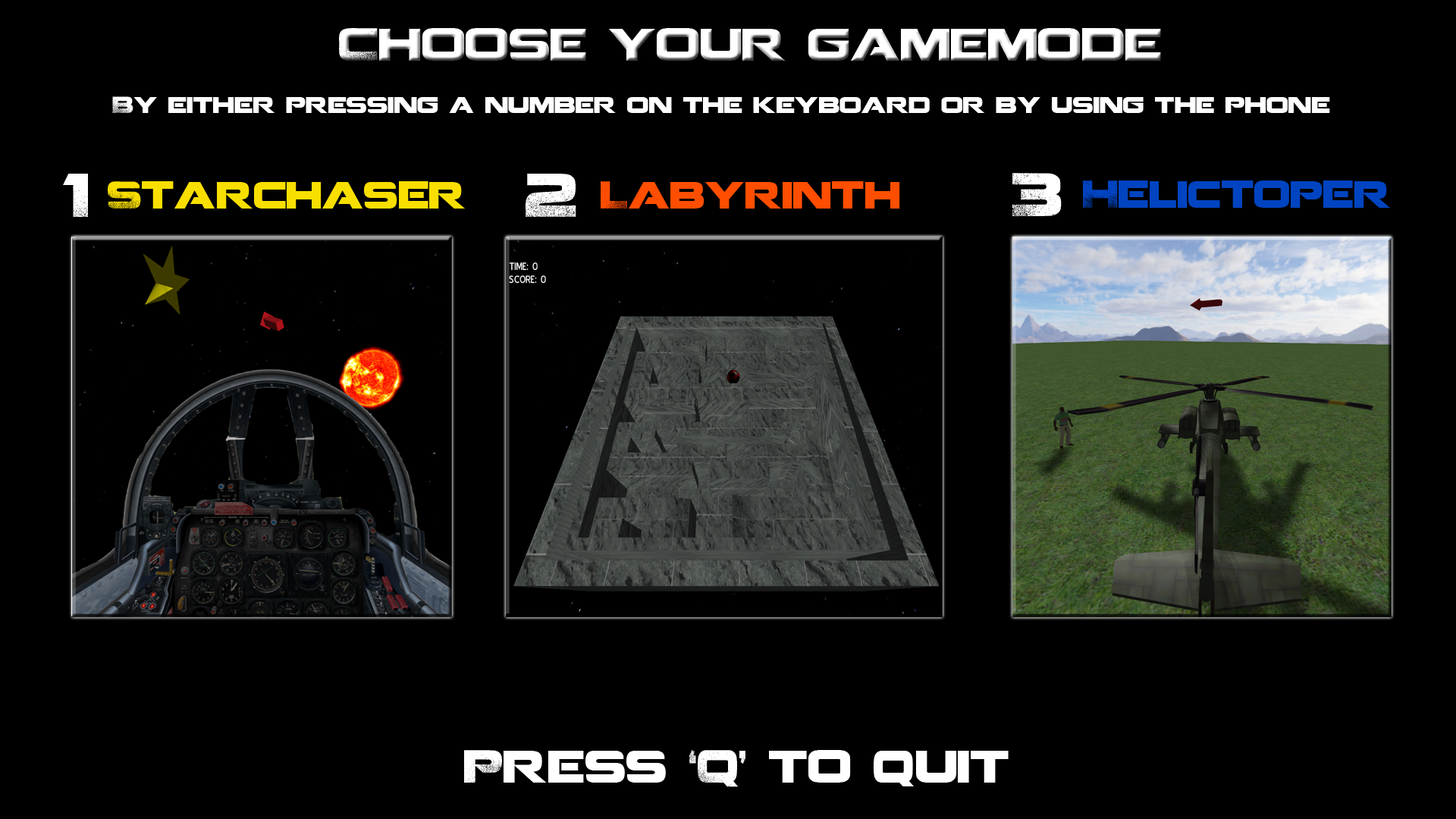
<style>
.page{position:relative;width:1456px;height:819px;background:#000000}
.page>*{position:absolute;margin:0}
.t1{font:45.5px "Coalition";color:#ffffff}
.t2{font:22.7px "Coalition";color:#ffffff}
.t3{font:60.7px "Coalition";color:#ffffff}
.t4{font:37.9px "Coalition";color:#f9df00}
.t5{font:37.9px "Coalition";color:#ff4e00}
.t6{font:37.9px "Coalition";color:#0044c1}
</style>
<div class="page">
<p class="t1" style="left:339px;top:28px;width:822px;height:33px">Choose your gamemode</p>
<p class="t2" style="left:112px;top:96px;width:1218px;height:17px">By either pressing a number on the keyboard or by using the phone</p>
<p class="t3" style="left:63px;top:174px;width:25px;height:43px">1</p>
<p class="t3" style="left:526px;top:174px;width:50px;height:43px">2</p>
<p class="t3" style="left:1012px;top:173px;width:50px;height:44px">3</p>
<p class="t4" style="left:108px;top:181px;width:357px;height:28px">Starchaser</p>
<p class="t5" style="left:601px;top:181px;width:299px;height:28px">Labyrinth</p>
<p class="t6" style="left:1083px;top:180px;width:307px;height:28px">Helictoper</p>
<p class="t1" style="left:464px;top:750px;width:545px;height:37px">Press ‘Q’ to quit</p>
</div>
